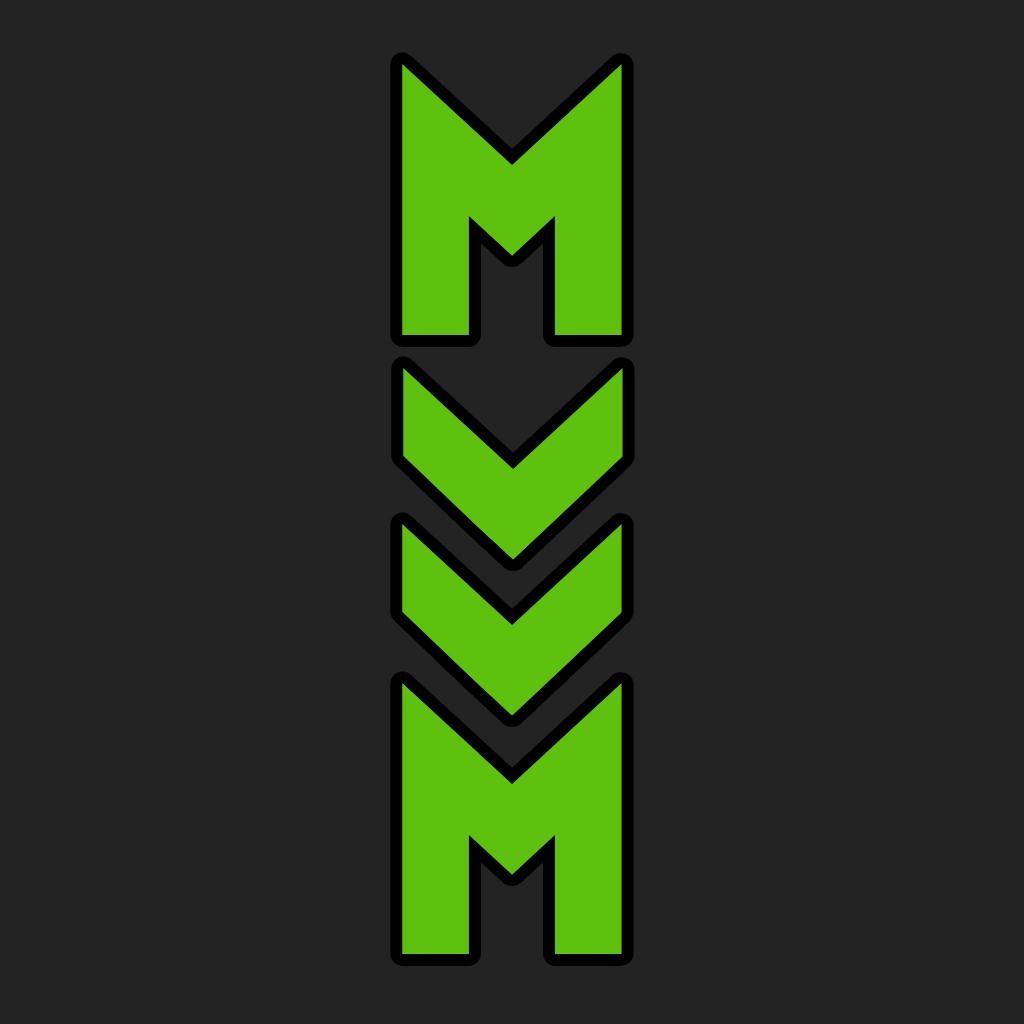
<style>
.page{position:relative;width:1024px;height:1024px;background:#232323}
.page>*{position:absolute;margin:0}
.t1{font:340px "Faktos";color:#5ec10e}
</style>
<div class="page">
<p class="t1" style="left:402px;top:64px;width:220px;height:271px">M</p>
<p class="t1" style="left:403px;top:368px;width:220px;height:271px">M</p>
<p class="t1" style="left:402px;top:524px;width:220px;height:271px">M</p>
<p class="t1" style="left:402px;top:683px;width:220px;height:271px">M</p>
</div>
